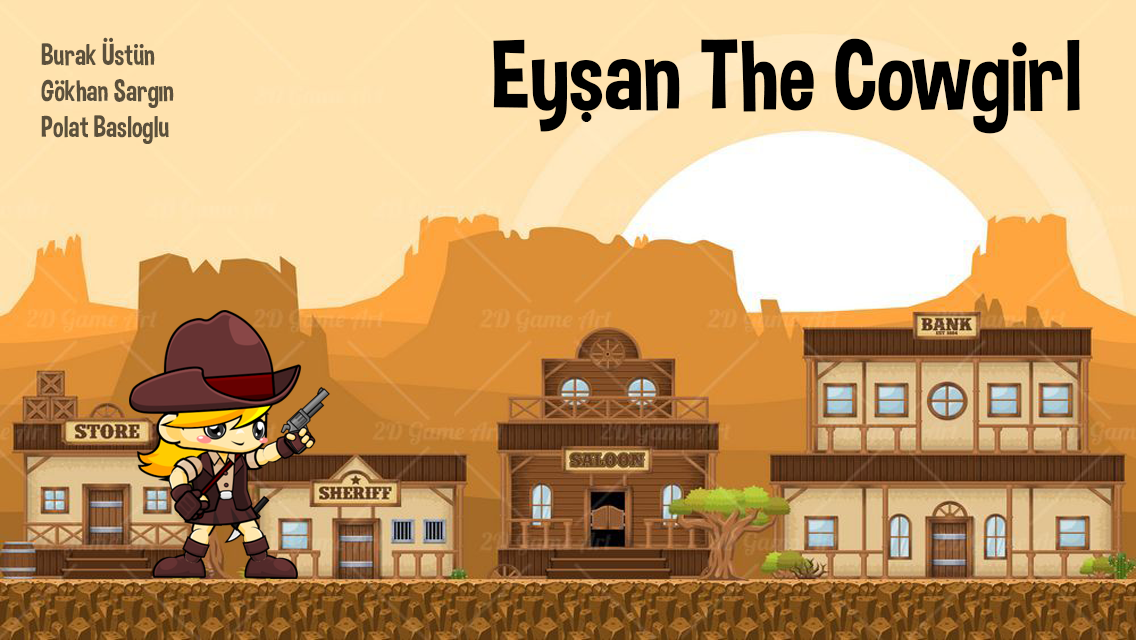
<style>
.page{position:relative;width:1136px;height:640px}
.page>*{position:absolute;margin:0}
.t1{font:29.9px "DimboRegular";color:#5b503c;scale:0.94 1}
.t2{font:99.8px "DimboRegular";color:#000000}
.t3{font:70px "DimboRegular";color:#000000}
</style>
<div class="page">
<p class="t1" style="left:41px;top:37px;width:133px;height:107px">Burak Üstün<br>Gökhan Sargın<br>Polat Basloglu</p>
<p class="t2" style="left:493px;top:38px;width:587px;height:96px">Eysan The Cowgirl</p>
<p class="t3" style="left:581px;top:112px;width:11px;height:10px">.</p>
</div>
